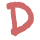
<style>
.page{position:relative;width:40px;height:40px;background:#ffffff}
.page>*{position:absolute;margin:0}
.t1{font:44.1px "AxureHandwriting-Bold";color:#cd6969;scale:0.95 1}
</style>
<div class="page">
<p class="t1" style="left:6px;top:1px;width:28px;height:36px">D</p>
</div>
